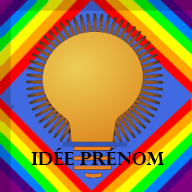
<style>
.page{position:relative;width:192px;height:192px}
.page>*{position:absolute;margin:0}
.t1{font:18px "PerpetuaTitlingMT-Bold";color:#000000}
</style>
<div class="page">
<p class="t1" style="left:31px;top:148px;width:133px;height:17px">Idée Prénom</p>
</div>
